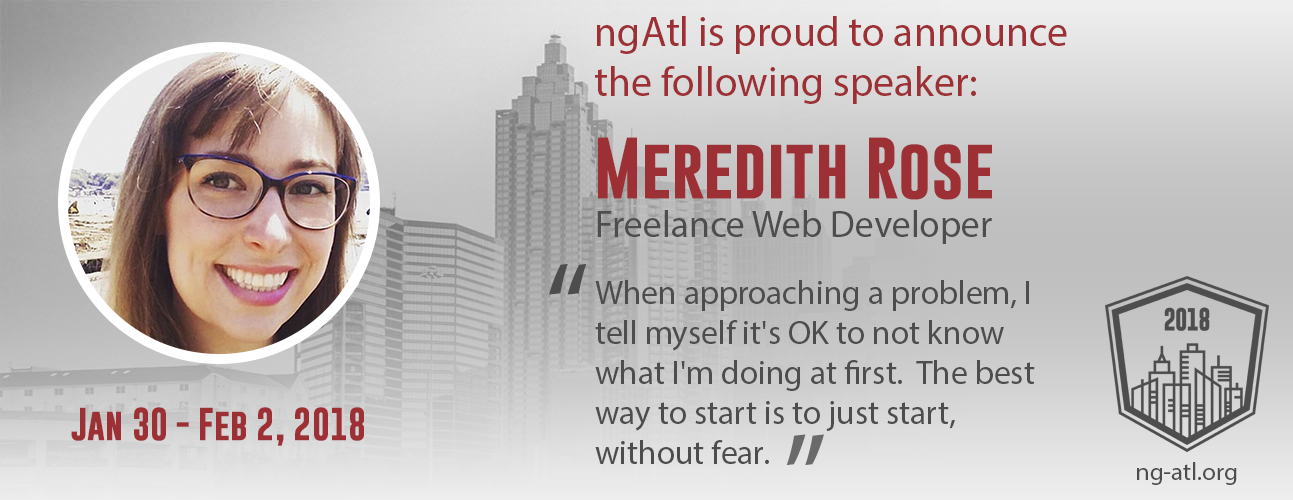
<style>
.page{position:relative;width:1293px;height:500px}
.page>*{position:absolute;margin:0}
.t1{font:41.7px "MyriadPro-Regular";color:#9d3035}
.t2{font:62.5px "GoboldBold";color:#9d3035}
.t3{font:37.5px "MyriadPro-Regular";color:#4d4d4e}
.t4{font:125px "MyriadPro-Regular";color:#4d4d4e}
.t5{font:33.3px "MyriadPro-Regular";color:#4d4d4e}
.t6{font:33.3px "GoboldBold";color:#9d3035}
.t7{font:125px "MyriadPro-Regular";color:#6a6a6b}
.t8{font:25px "MyriadPro-Regular";color:#4d4d4e}
</style>
<div class="page">
<p class="t1" style="left:595px;top:16px;width:472px;height:88px">ngAtl is proud to announce the following speaker:</p>
<p class="t2" style="left:598px;top:137px;width:394px;height:63px">Meredith Rose</p>
<p class="t3" style="left:597px;top:210px;width:395px;height:34px">Freelance Web Developer</p>
<p class="t4" style="left:549px;top:263px;width:38px;height:32px">“</p>
<p class="t5" style="left:595px;top:280px;width:440px;height:184px">When approaching a problem, I tell myself it's OK to not know what I'm doing at first.  The best way to start is to just start, without fear.</p>
<p class="t6" style="left:71px;top:407px;width:293px;height:39px">Jan 30 - Feb 2, 2018</p>
<p class="t7" style="left:786px;top:434px;width:38px;height:32px;rotate:180deg">“</p>
<p class="t8" style="left:1137px;top:462px;width:100px;height:23px">ng-atl.org</p>
</div>
